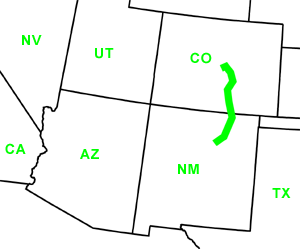
<style>
.page{position:relative;width:300px;height:249px;background:#ffffff}
.page>*{position:absolute;margin:0}
.t1{font:14px "Arial-BoldMT";letter-spacing:0.05em;color:#00ff00}
</style>
<div class="page">
<p class="t1" style="left:22px;top:35px;width:20px;height:10px">NV</p>
<p class="t1" style="left:95px;top:48px;width:19px;height:11px">UT</p>
<p class="t1" style="left:190px;top:52px;width:22px;height:12px">CO</p>
<p class="t1" style="left:5px;top:143px;width:21px;height:11px">CA</p>
<p class="t1" style="left:80px;top:149px;width:19px;height:10px">AZ</p>
<p class="t1" style="left:178px;top:164px;width:21px;height:10px">NM</p>
<p class="t1" style="left:272px;top:188px;width:19px;height:10px">TX</p>
</div>
